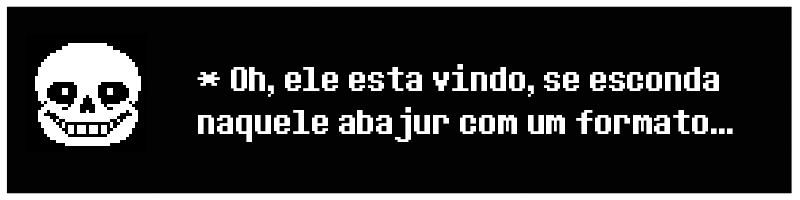
<style>
.page{position:relative;width:800px;height:200px;background:#020202}
.page>*{position:absolute;margin:0}
.t1{font:36px "DeterminationSans";color:#ffffff}
</style>
<div class="page">
<p class="t1" style="left:197px;top:64px;width:536px;height:78px">* Oh, ele esta vindo, se esconda naquele abajur com um formato...</p>
</div>
